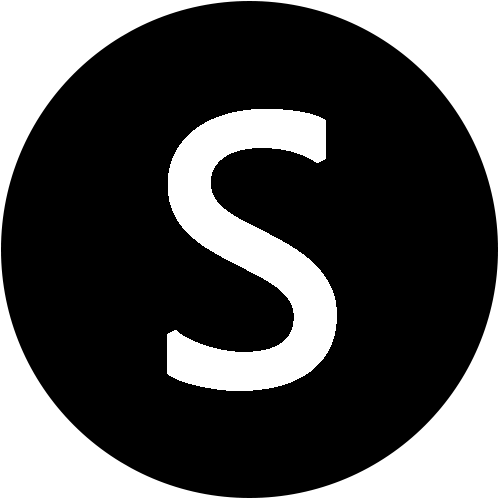
<style>
.page{position:relative;width:500px;height:500px;background:#000000}
.page>*{position:absolute;margin:0}
.t1{font:375px "Ebrima";color:#ffffff;font-weight:bold}
</style>
<div class="page">
<p class="t1" style="left:167px;top:109px;width:170px;height:282px">S</p>
</div>
